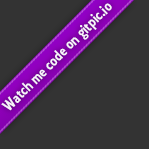
<style>
.page{position:relative;width:149px;height:149px;background:#333333}
.page>*{position:absolute;margin:0}
.t1{font:16px "Collegiate";color:#ffffff}
</style>
<div class="page">
<p class="t1" style="left:1px;top:3px;width:111px;height:108px;rotate:-45deg">Watch me code on gitpic.io</p>
</div>
